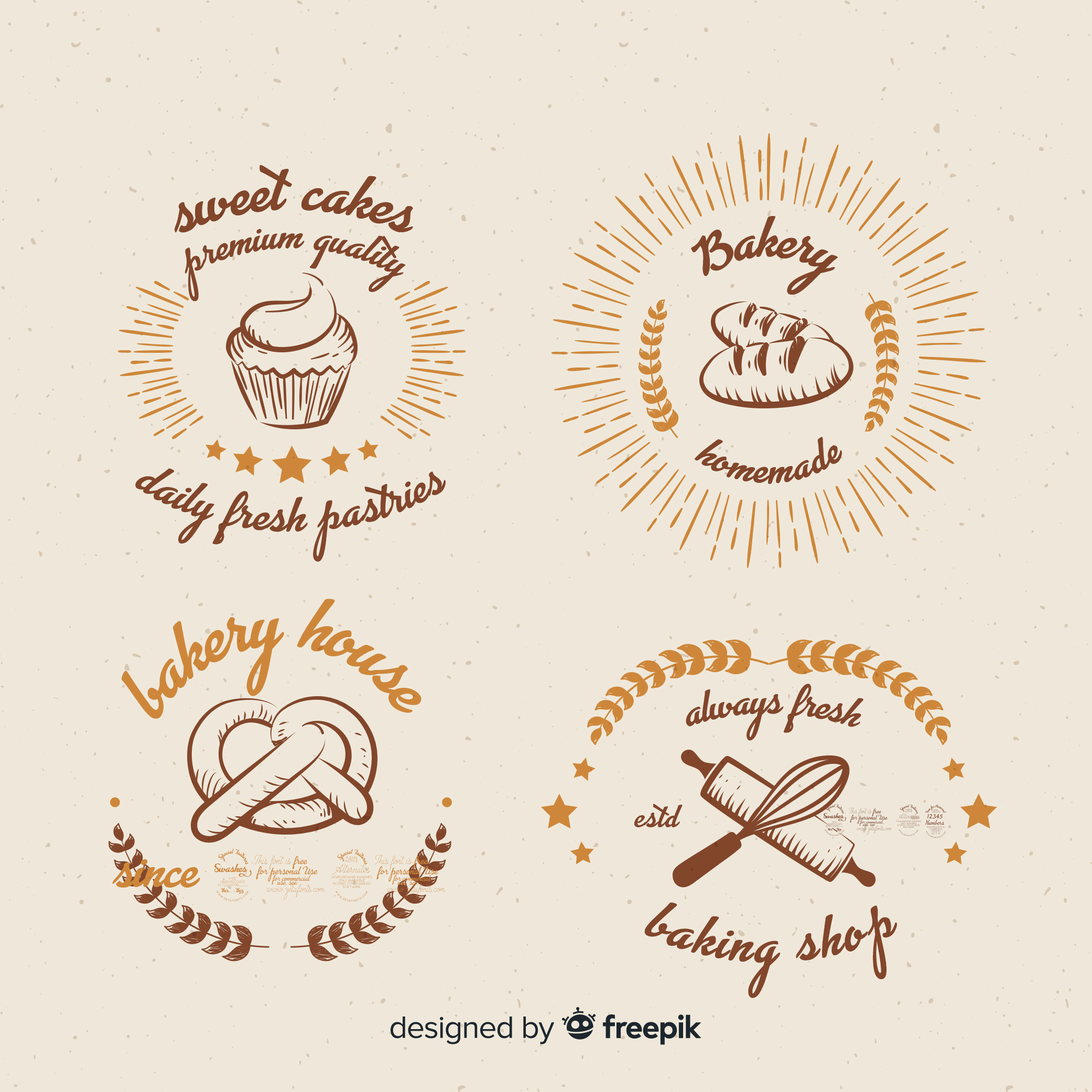
<style>
.page{position:relative;width:1092px;height:1092px;background:#efe8da}
.page>*{position:absolute;margin:0}
.t1{font:51.3px "AdvertisingScript-Bold";letter-spacing:0.04em;color:#82462b}
.t2{font:47.4px "AdvertisingScript-Bold";letter-spacing:0.04em;color:#82462b}
.t3{font:34.5px "AdvertisingScript-Bold";color:#82462b}
.t4{font:35.4px "AdvertisingScript-Bold";color:#82462b}
.t5{font:40.2px "AdvertisingScript-Bold";color:#82462b}
.t6{font:63.3px "AdvertisingScript-Bold";letter-spacing:0.04em;color:#ce873a}
.t7{font:26.5px "AdvertisingScript-Bold";letter-spacing:0.04em;color:#82462b}
.t8{font:43.8px "AdvertisingScript-Bold";color:#ce873a}
</style>
<div class="page">
<p class="t1" style="left:175px;top:165px;width:238px;height:68px">sweet cakes</p>
<p class="t1" style="left:175px;top:165px;width:238px;height:68px">sweet cakes</p>
<p class="t2" style="left:691px;top:216px;width:147px;height:79px">Bakery</p>
<p class="t2" style="left:691px;top:216px;width:147px;height:79px">Bakery</p>
<p class="t3" style="left:185px;top:229px;width:221px;height:72px;text-align:center">premium quality</p>
<p class="t4" style="left:695px;top:437px;width:147px;height:47px">homemade</p>
<p class="t4" style="left:695px;top:437px;width:147px;height:47px">homemade</p>
<p class="t5" style="left:135px;top:468px;width:311px;height:94px;text-align:center">daily fresh pastries</p>
<p class="t6" style="left:121px;top:599px;width:300px;height:120px;text-align:center">bakery house</p>
<p class="t4" style="left:686px;top:684px;width:177px;height:57px">always fresh</p>
<p class="t7" style="left:634px;top:804px;width:49px;height:23px">estd</p>
<p class="t7" style="left:824px;top:804px;width:123px;height:34px">2015</p>
<p class="t8" style="left:112px;top:849px;width:334px;height:53px">since 2019</p>
<p class="t2" style="left:644px;top:902px;width:253px;height:96px;text-align:center">baking shop</p>
</div>
